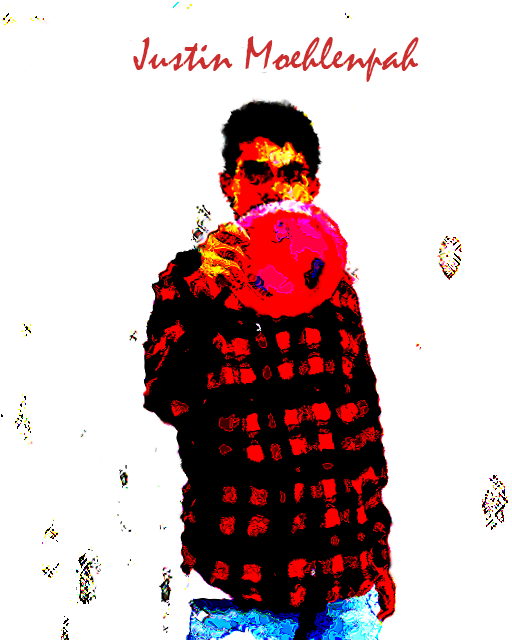
<style>
.page{position:relative;width:512px;height:640px;background:#ffffff}
.page>*{position:absolute;margin:0}
.t1{font:48px "Mistral";color:#cc2d2d}
</style>
<div class="page">
<p class="t1" style="left:133px;top:36px;width:286px;height:46px">Justin Moehlenpah</p>
</div>
